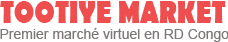
<style>
.page{position:relative;width:228px;height:42px;background:#ffffff}
.page>*{position:absolute;margin:0}
.t1{font:32.3px "BerlinSansFB-Bold";color:#ef4e4e;scale:0.81 1}
.t2{font:14px "ArialMT";color:#7f7878}
</style>
<div class="page">
<p class="t1" style="left:0px;top:1px;width:226px;height:22px">TOOTIYE MARKET</p>
<p class="t2" style="left:0px;top:28px;width:229px;height:14px">Premier marché virtuel en RD Congo</p>
</div>
